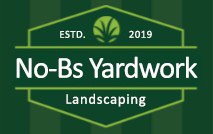
<style>
.page{position:relative;width:213px;height:134px;background:#0a4529}
.page>*{position:absolute;margin:0}
.t1{font:10.7px "Calibri";letter-spacing:0.05em;color:#fefefe}
.t2{font:30.7px "Calibri";letter-spacing:-0.035em;color:#ffffff}
.t3{font:14.7px "Calibri";letter-spacing:0.05em;color:#fefefe}
</style>
<div class="page">
<p class="t1" style="left:60px;top:30px;width:25px;height:8px">ESTD.</p>
<p class="t1" style="left:129px;top:30px;width:23px;height:8px">2019</p>
<p class="t2" style="left:16px;top:56px;width:182px;height:22px">No-Bs Yardwork</p>
<p class="t3" style="left:66px;top:93px;width:80px;height:14px">Landscaping</p>
</div>
